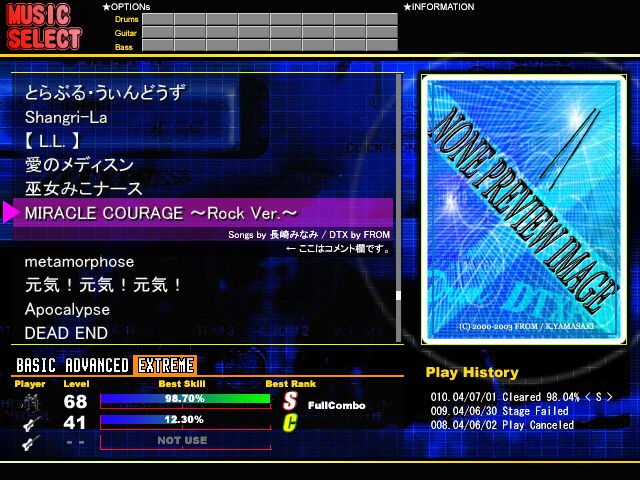
<style>
.page{position:relative;width:640px;height:480px}
.page>*{position:absolute;margin:0}
.t1{font:24px/12px "DFMaruGothic-SU-WIN-RKSJ-H"}
.t2{font:9px "ArialMT";color:#fdf8f8}
.t3{font:9px "MS-Gothic";color:#fdf8f8}
.t4{font:8px/14px "ArialMT";color:#fbd60a}
.t5{font:18px/24px "MS-PGothic";color:#f7f9f7}
.t6{font:10px "MS-PGothic";color:#fdf8f8}
.t7{font:14px "Arial-Black";color:#ffda0f}
.t8{font:9px "Arial-Black";color:#ffda0f}
.t9{font:18px "Arial-Black";color:#fdfffd}
.t10{font:10px "Arial-Black";color:#fefcfc}
.t11{font:10px "Arial-Black";color:#fdf8f8}
.t12{font:11px/14px "MS-Gothic";color:#f6f6f6}
.t13{font:14px/24px "Arial-Black";color:#ffda0f}
.t14{font:11px/24px "MS-Gothic";color:#f6f6f6}
.t15{font:10px "Arial-Black";color:#727171}
.t16{font:18px "Arial-Black";color:#707170}
</style>
<div class="page">
<p class="t1" style="left:8px;top:5px;width:73px;height:44px">MUSIC<br><br>SELECT</p>
<p class="t2" style="left:102px;top:3px;width:48px;height:8px"><span class="t3">★</span>OPTIONs</p>
<p class="t2" style="left:403px;top:3px;width:71px;height:8px"><span class="t3">★</span>INFORMATION</p>
<p class="t4" style="left:115px;top:16px;width:24px;height:34px">Drums<br>Guitar<br>Bass</p>
<p class="t5" style="left:24px;top:84px;width:273px;height:255px">とらぶる・うぃんどうず<br>Shangri-La<br>【 L.L. 】<br>愛のメディスン<br>巫女みこナース<br>MIRACLE COURAGE ～Rock Ver.～<br><br>metamorphose<br>元気！元気！元気！<br>Apocalypse<br>DEAD END</p>
<p class="t6" style="left:228px;top:230px;width:162px;height:10px">Songs by 長崎みなみ / DTX by FROM</p>
<p class="t6" style="left:286px;top:244px;width:102px;height:9px">← ここはコメント欄です。</p>
<p class="t7" style="left:426px;top:367px;width:93px;height:13px">Play History</p>
<p class="t8" style="left:15px;top:380px;width:301px;height:9px">Player      Level                       Best Skill                    Best Rank</p>
<p class="t9" style="left:64px;top:394px;width:23px;height:15px">68</p>
<p class="t10" style="left:165px;top:394px;width:40px;height:8px">98.70%</p>
<p class="t11" style="left:308px;top:401px;width:58px;height:8px">FullCombo</p>
<p class="t12" style="left:431px;top:392px;width:181px;height:39px"><span class="t13"><br>  </span><span class="t14">010.</span>04/07/01 Cleared 98.04% &lt; S &gt;<br> 009.04/06/30 Stage Failed<br> 008.04/06/02 Play Canceled</p>
<p class="t9" style="left:63px;top:415px;width:22px;height:14px">41</p>
<p class="t10" style="left:165px;top:415px;width:39px;height:8px">12.30%</p>
<p class="t15" style="left:158px;top:436px;width:49px;height:8px">NOT USE</p>
<p class="t16" style="left:67px;top:441px;width:17px;height:3px">- -</p>
</div>
